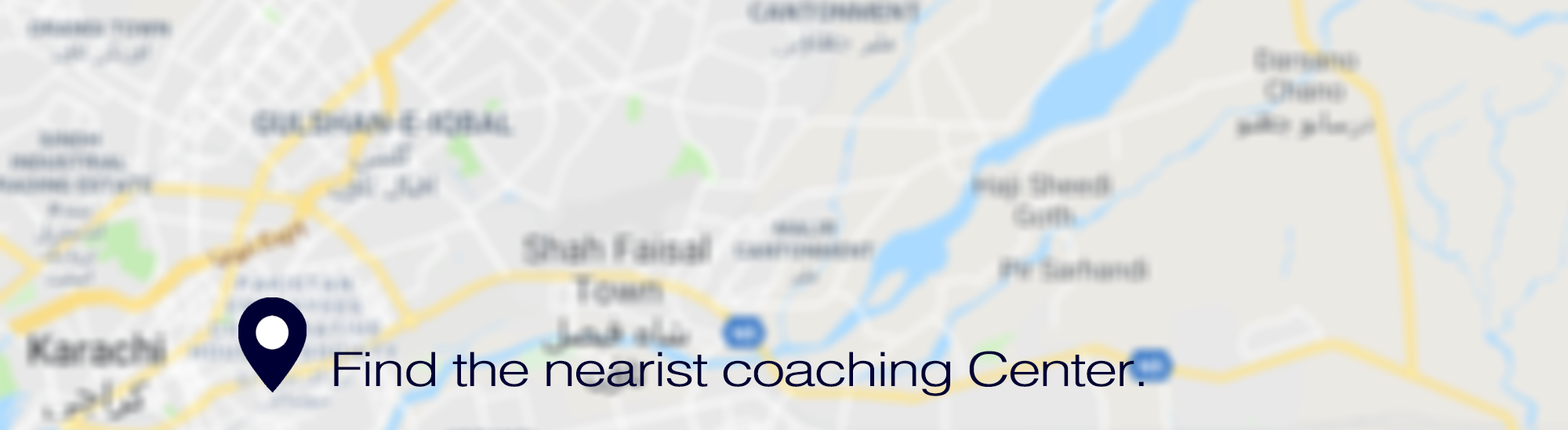
<style>
.page{position:relative;width:1568px;height:430px;background:#ebe9e4}
.page>*{position:absolute;margin:0}
.t1{font:47px "HelvLight-Normal";letter-spacing:-0.04em;color:#000034;scale:1.28 1}
</style>
<div class="page">
<p class="t1" style="left:334px;top:350px;width:810px;height:46px">Find the nearist coaching Center.</p>
</div>
